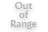
<style>
.page{position:relative;width:48px;height:32px;background:#ffffff}
.page>*{position:absolute;margin:0}
.t1{font:10px/9px "AmiraParadiso";color:#b5b5b5}
</style>
<div class="page">
<p class="t1" style="left:10px;top:2px;width:27px;height:27px;text-align:center">Out<br>of<br>Range</p>
</div>
